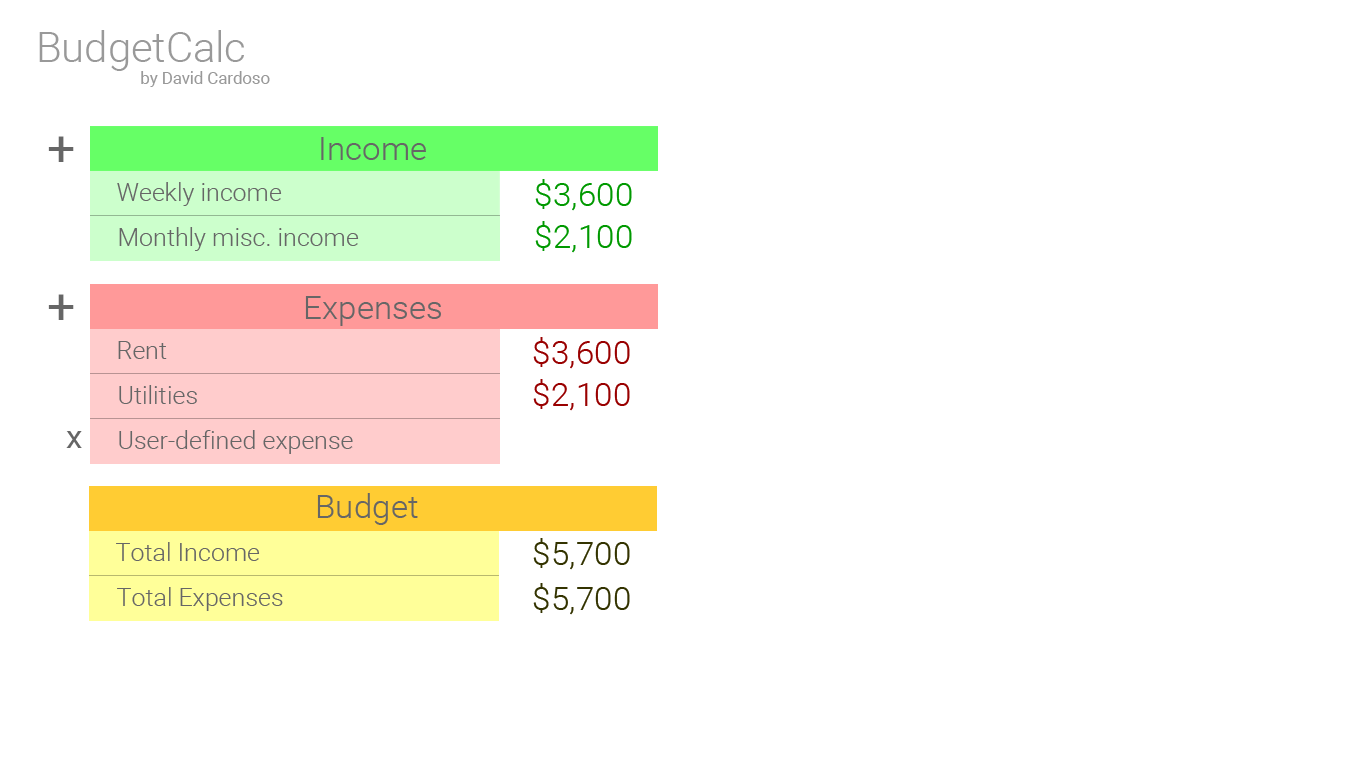
<style>
.page{position:relative;width:1366px;height:768px;background:#ffffff}
.page>*{position:absolute;margin:0}
.t1{font:41.7px "Roboto-Light";color:#999999}
.t2{font:16.7px "Roboto-Regular";color:#999999}
.t3{font:50px "Roboto-Regular";color:#666666}
.t4{font:33.3px "Roboto-Light";color:#666666}
.t5{font:25px "Roboto-Light";color:#666666}
.t6{font:33.3px "Roboto-Light";color:#009900}
.t7{font:33.3px "Roboto-Light";color:#990000}
.t8{font:33.3px "Roboto-Regular";color:#666666}
.t9{font:33.3px "Roboto-Light";color:#333300}
</style>
<div class="page">
<p class="t1" style="left:39px;top:30px;width:205px;height:41px">BudgetCalc</p>
<p class="t2" style="left:141px;top:71px;width:129px;height:16px">by David Cardoso</p>
<p class="t3" style="left:48px;top:136px;width:26px;height:26px">+</p>
<p class="t4" style="left:321px;top:137px;width:105px;height:23px">Income</p>
<p class="t5" style="left:117px;top:182px;width:165px;height:24px">Weekly income</p>
<p class="t6" style="left:535px;top:179px;width:97px;height:32px">$3,600</p>
<p class="t6" style="left:535px;top:221px;width:97px;height:32px">$2,100</p>
<p class="t5" style="left:119px;top:227px;width:240px;height:24px">Monthly misc. income</p>
<p class="t3" style="left:48px;top:294px;width:26px;height:26px">+</p>
<p class="t4" style="left:305px;top:296px;width:136px;height:30px">Expenses</p>
<p class="t5" style="left:118px;top:341px;width:49px;height:18px">Rent</p>
<p class="t7" style="left:533px;top:337px;width:97px;height:32px">$3,600</p>
<p class="t5" style="left:119px;top:385px;width:78px;height:19px">Utilities</p>
<p class="t7" style="left:533px;top:379px;width:97px;height:32px">$2,100</p>
<p class="t8" style="left:66px;top:431px;width:16px;height:17px">x</p>
<p class="t5" style="left:119px;top:430px;width:234px;height:24px">User-defined expense</p>
<p class="t4" style="left:317px;top:493px;width:101px;height:32px">Budget</p>
<p class="t5" style="left:116px;top:542px;width:144px;height:19px">Total Income</p>
<p class="t9" style="left:533px;top:538px;width:97px;height:32px">$5,700</p>
<p class="t5" style="left:117px;top:587px;width:166px;height:24px">Total Expenses</p>
<p class="t9" style="left:533px;top:583px;width:97px;height:32px">$5,700</p>
</div>
